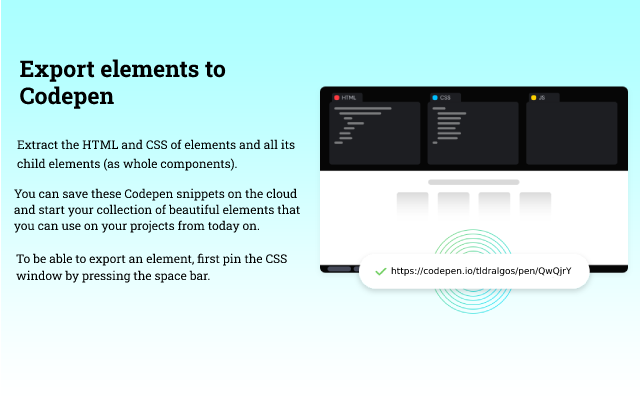
<style>
.page{position:relative;width:640px;height:400px}
.page>*{position:absolute;margin:0}
.t1{font:23px "RobotoSlab-Bold";color:#000000}
.t2{font:12px "RobotoSlab-Regular";color:#000000}
.t3{font:9px "DejaVuSans";color:#000000}
</style>
<div class="page">
<p class="t1" style="left:20px;top:59px;width:206px;height:50px">Export elements to <br>Codepen</p>
<p class="t2" style="left:17px;top:139px;width:278px;height:32px">Extract the HTML and CSS of elements and all its <br>child elements (as whole components).</p>
<p class="t2" style="left:14px;top:188px;width:286px;height:45px">You can save these Codepen snippets on the cloud <br><br><br>and start your collection of beautiful elements that <br><br><br>you can use on your projects from today on.</p>
<p class="t2" style="left:16px;top:253px;width:271px;height:30px">To be able to export an element, first pin the CSS <br><br><br>window by pressing the space bar.</p>
<p class="t3" style="left:391px;top:267px;width:181px;height:9px">https://codepen.io/tldralgos/pen/QwQjrY</p>
</div>
